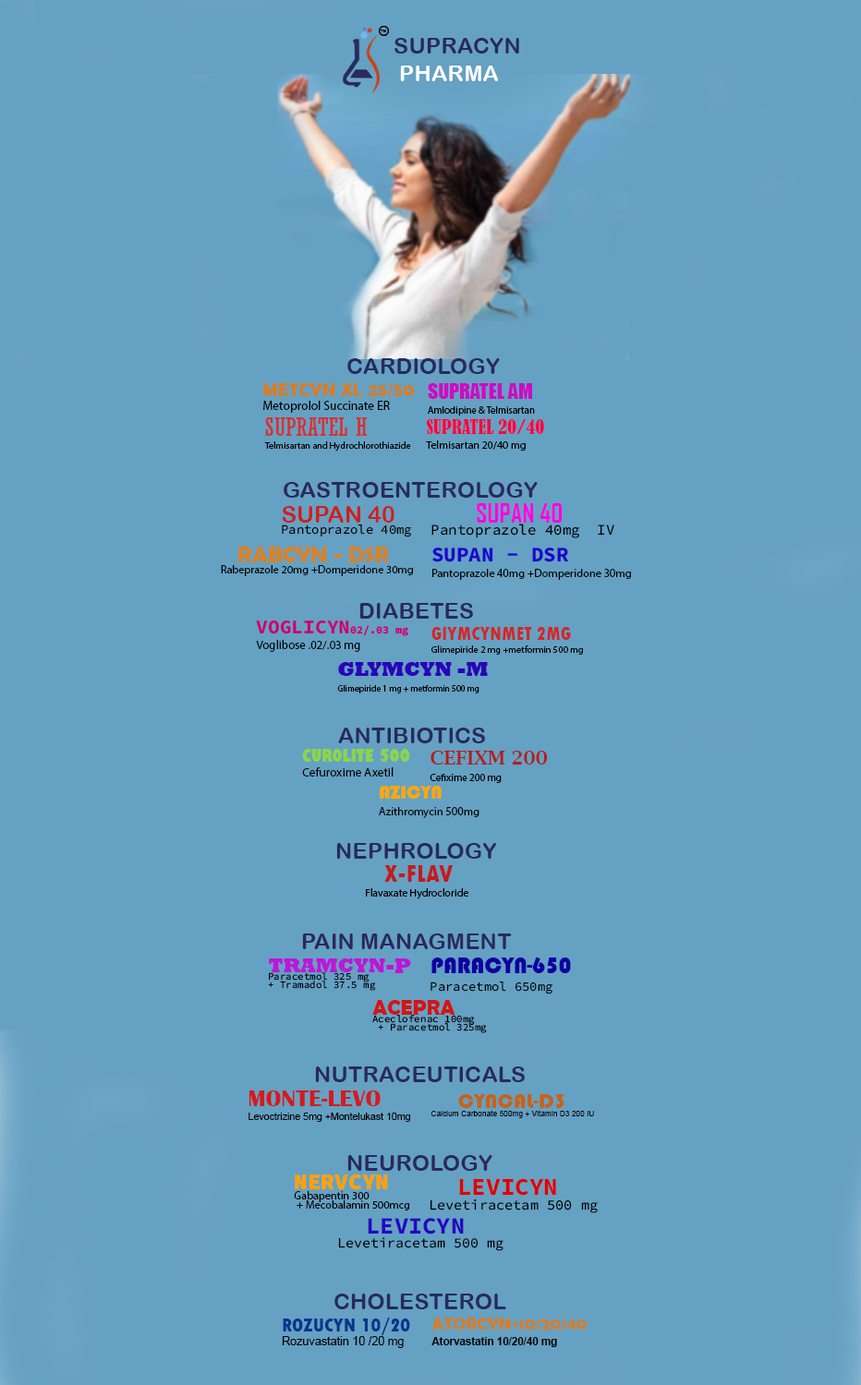
<style>
.page{position:relative;width:861px;height:1385px;background:#65a1c3}
.page>*{position:absolute;margin:0}
.t1{font:4px "ArialRoundedMTBold";color:#000000;text-transform:uppercase}
.t2{font:22.6px "ArialRoundedMTBold";color:#29295f;text-transform:uppercase}
.t3{font:12.6px/14px "MyriadPro-Regular";color:#000000}
.t4{font:18.9px/14px "BerlinSansFBDemi-Bold";color:#d47d2a}
.t5{font:10px/14.9px "MyriadPro-Regular";color:#000000}
.t6{font:20.1px/14.9px "Impact";color:#c90ec2}
.t7{font:9.5px/12.7px "MyriadPro-Regular";color:#000000}
.t8{font:24.8px/12.7px "Rockwell-Condensed";color:#d23434}
.t9{font:11px/14.6px "MyriadPro-Regular";color:#000000}
.t10{font:18.7px/14.6px "BernardMT-Condensed";color:#ff0042}
.t11{font:12.8px/11.7px "SourceCodeVariable-Roman";color:#000000}
.t12{font:23.2px/11.7px "ArialRoundedMTBold";color:#cb2121}
.t13{font:14.6px/11.9px "SourceCodeVariable-Roman";color:#000000}
.t14{font:25.3px/17.8px "AgencyFB-Reg";color:#75cceb}
.t15{font:25.3px/17.8px "AgencyFB-Bold";color:#fc00e1}
.t16{font:11.3px/11.4px "MyriadPro-Regular";color:#000000}
.t17{font:22.7px/11.4px "BerlinSansFBDemi-Bold";color:#d5822b}
.t18{font:11.5px/15.4px "MyriadPro-Regular";color:#000000}
.t19{font:20.8px/15.4px "SourceCodeRoman-Bold";color:#1d06cb}
.t20{font:11.9px/15.4px "MyriadPro-Regular";color:#000000}
.t21{font:19.6px/14.5px "SourceCodeRoman-Bold";color:#c70171}
.t22{font:19.6px/10.8px "SourceCodeRoman-Bold";color:#c70171}
.t23{font:10.8px/15.4px "SourceCodeRoman-Bold";color:#c70171}
.t24{font:9.6px/12.9px "MyriadPro-Regular";color:#000000}
.t25{font:19.3px/12.9px "TwCenMT-CondensedExtraBold";color:#d02828}
.t26{font:8.9px/14.9px "MyriadPro-Regular";color:#000000}
.t27{font:20.1px/14.9px "Rockwell-ExtraBold";color:#2a04b8}
.t28{font:12.4px/14.9px "MyriadPro-Regular";color:#000000}
.t29{font:17.6px/14.9px "GillSans-UltraBoldCondensed";color:#8cd44c}
.t30{font:10.3px/16.6px "MyriadPro-Regular";color:#000000}
.t31{font:19.5px/16.6px "LucidaBright-Demi";color:#af2020}
.t32{font:11.6px/17px "MyriadPro-Regular";color:#000000}
.t33{font:19.3px/16.9px "Bauhaus93";color:#ffa800}
.t34{font:10.8px/14.5px "MyriadPro-Regular";color:#000000}
.t35{font:26.2px/14.5px "TwCenMT-CondensedExtraBold";color:#c21c1c}
.t36{font:9.9px/7.8px "SourceCodeVariable-Roman";color:#000000}
.t37{font:20px/14px "Rockwell-ExtraBold";color:#ba18d7}
.t38{font:12.8px/17.1px "SourceCodeVariable-Roman";color:#000000}
.t39{font:23.1px/17.1px "Bauhaus93";color:#0f00a1}
.t40{font:10px/7.8px "SourceCodeVariable-Roman";color:#000000}
.t41{font:21.3px/14.2px "BerlinSansFBDemi-Bold";color:#d31515}
.t42{font:9.8px/14.6px "ArialMT";color:#000000}
.t43{font:24.1px/14.6px "BritannicBold";color:#d21c1c}
.t44{font:7.7px/9px "ArialMT";color:#000000}
.t45{font:21.5px/9px "Bauhaus93";color:#c3641d}
.t46{font:11.2px/9.7px "MyriadPro-Regular";color:#000000}
.t47{font:22.6px/13.7px "SourceCodeRoman-Black";color:#ffa200}
.t48{font:14.1px/14.5px "SourceCodeVariable-Roman";color:#000000}
.t49{font:24px/14.5px "SourceCodeRoman-Bold";color:#e00000}
.t50{font:13.8px/14.2px "SourceCodeVariable-Roman";color:#000000}
.t51{font:23.5px/14.2px "SourceCodeRoman-Bold";color:#2605c2}
.t52{font:11.6px/14.2px "ArialMT";color:#000000}
.t53{font:20.2px/14.2px "TwCenMT-CondensedExtraBold";color:#04368e}
.t54{font:10.7px/15.4px "Arial-BoldMT";color:#000000}
.t55{font:17.3px/15.4px "BerlinSansFBDemi-Bold";color:#d47d2a}
</style>
<div class="page">
<p class="t1" style="left:380px;top:30px;width:6px;height:2px">TM</p>
<p class="t2" style="left:347px;top:358px;width:153px;height:16px">cardiology</p>
<p class="t3" style="left:263px;top:383px;width:152px;height:30px"><span class="t4">METCYN XL 25/50<br></span>Metoprolol Succinate ER</p>
<p class="t5" style="left:428px;top:383px;width:107px;height:33px"><span class="t6">SUPRATEL AM<br></span>Amlodipine &amp; Telmisartan</p>
<p class="t7" style="left:264px;top:417px;width:147px;height:35px"><span class="t8">SUPRATEL H<br></span>Telmisartan and Hydrochlorothiazide</p>
<p class="t9" style="left:426px;top:419px;width:118px;height:32px"><span class="t10">SUPRATEL 20/40<br></span>Telmisartan 20/40 mg</p>
<p class="t2" style="left:284px;top:482px;width:254px;height:16px">gastroenterology</p>
<p class="t11" style="left:282px;top:506px;width:129px;height:32px"><span class="t12">SUPAN 40 <br></span>Pantoprazole 40mg</p>
<p class="t13" style="left:431px;top:503px;width:183px;height:35px"><span class="t14">         </span><span class="t15">SUPAN 40 <br></span>Pantoprazole 40mg  IV</p>
<p class="t16" style="left:221px;top:547px;width:192px;height:29px"><span class="t17">   RABCYN - DSR<br></span>Rabeprazole 20mg +Domperidone 30mg</p>
<p class="t18" style="left:432px;top:548px;width:199px;height:32px"><span class="t19">SUPAN - DSR<br></span>Pantoprazole 40mg +Domperidone 30mg</p>
<p class="t2" style="left:359px;top:603px;width:114px;height:16px">diabetes</p>
<p class="t20" style="left:256px;top:621px;width:152px;height:31px"><span class="t21">VOGLICY</span><span class="t22">N</span><span class="t23">02/.03 mg<br></span>Voglibose .02/.03 mg</p>
<p class="t24" style="left:431px;top:627px;width:152px;height:28px"><span class="t25">GlYMCYNMET 2MG<br></span>Glimepiride 2 mg +metformin 500 mg</p>
<p class="t26" style="left:337px;top:662px;width:151px;height:32px"><span class="t27">GLYMCYN -M<br></span>Glimepiride 1 mg + metformin 500 mg</p>
<p class="t2" style="left:338px;top:728px;width:147px;height:15px">antibiotics</p>
<p class="t28" style="left:302px;top:749px;width:108px;height:28px"><span class="t29">CUROLITE 500<br></span>Cefuroxime Axetil</p>
<p class="t30" style="left:429px;top:751px;width:119px;height:32px"><span class="t31">CEFIXM 200<br></span>Cefixime 200 mg</p>
<p class="t32" style="left:379px;top:786px;width:100px;height:32px"><span class="t33">AZICYN <br></span>Azithromycin 500mg</p>
<p class="t2" style="left:336px;top:843px;width:160px;height:16px">Nephrology</p>
<p class="t34" style="left:366px;top:865px;width:102px;height:35px"><span class="t35">   X-FLAV<br></span>Flavaxate Hydrocloride</p>
<p class="t2" style="left:302px;top:934px;width:210px;height:15px">pain managment</p>
<p class="t36" style="left:268px;top:959px;width:143px;height:32px"><span class="t37">TRAMCYN-P<br></span>Paracetmol 325 mg <br>+ Tramadol 37.5 mg</p>
<p class="t38" style="left:430px;top:957px;width:141px;height:38px"><span class="t39">PARACYN-650<br></span>Paracetmol 650mg</p>
<p class="t40" style="left:372px;top:1000px;width:115px;height:33px"><span class="t41">ACEPRA<br></span>Aceclofenac 100mg<br> + Paracetmol 325mg</p>
<p class="t2" style="left:315px;top:1067px;width:210px;height:15px">nutraceuticals</p>
<p class="t42" style="left:248px;top:1091px;width:162px;height:31px"><span class="t43">MONTE-LEVO<br></span>Levoctrizine 5mg +Montelukast 10mg</p>
<p class="t44" style="left:430px;top:1094px;width:164px;height:24px"><span class="t45">     CYNCAL-D3<br></span>Calcium Carbonate 500mg + Vitamin D3 200 IU</p>
<p class="t2" style="left:347px;top:1155px;width:145px;height:16px">neurology</p>
<p class="t46" style="left:294px;top:1174px;width:115px;height:37px"><span class="t47">NERVCYN<br></span>Gabapentin 300<br> + Mecobalamin 500mcg</p>
<p class="t48" style="left:429px;top:1178px;width:169px;height:36px"><span class="t49">  LEVICYN<br></span>Levetiracetam 500 mg</p>
<p class="t50" style="left:338px;top:1218px;width:165px;height:33px"><span class="t51">  LEVICYN<br></span>Levetiracetam 500 mg</p>
<p class="t2" style="left:334px;top:1294px;width:172px;height:16px">cholesterol</p>
<p class="t52" style="left:282px;top:1318px;width:128px;height:30px"><span class="t53">ROZUCYN 10/20<br></span>Rozuvastatin 10 /20 mg</p>
<p class="t54" style="left:431px;top:1318px;width:155px;height:29px"><span class="t55">ATORCYN-10/20/40<br></span>Atorvastatin 10/20/40 mg</p>
</div>
